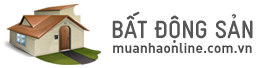
<style>
.page{position:relative;width:262px;height:68px;background:#ffffff}
.page>*{position:absolute;margin:0}
.t1{font:25px "GravinamCondensed-Bold";letter-spacing:-0.005em;color:#565656}
.t2{font:14px "DINPro-Bold";color:#4b4b4b}
</style>
<div class="page">
<p class="t1" style="left:112px;top:11px;width:141px;height:32px">BẤT ĐỘNG SẢN</p>
<p class="t2" style="left:113px;top:43px;width:139px;height:10px">muanhaonline.com.vn</p>
</div>
